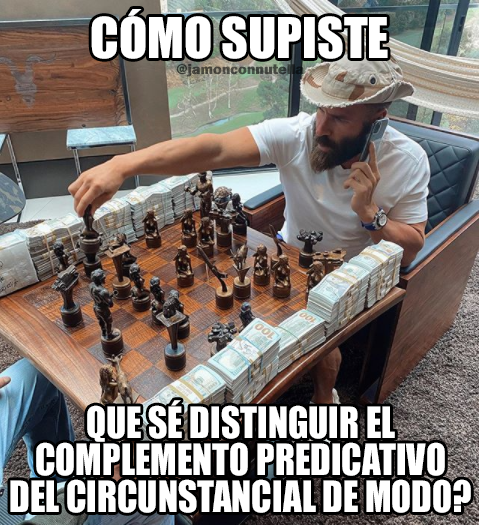
<style>
.page{position:relative;width:479px;height:525px}
.page>*{position:absolute;margin:0}
.t1{font:51.7px "Impact";color:#ffffff}
.t2{font:14.7px "FranklinGothic-Heavy";color:#42463e}
.t3{font:40px "Impact";color:#ffffff;scale:0.93 1}
</style>
<div class="page">
<p class="t1" style="left:91px;top:9px;width:297px;height:50px">CÓMO SUPISTE</p>
<p class="t2" style="left:176px;top:64px;width:128px;height:13px">@jamonconnutella</p>
<p class="t3" style="left:10px;top:400px;width:461px;height:113px;text-align:center">QUE SÉ DISTINGUIR EL<br>COMPLEMENTO PREDICATIVO<br>DEL CIRCUNSTANCIAL DE MODO?</p>
</div>
